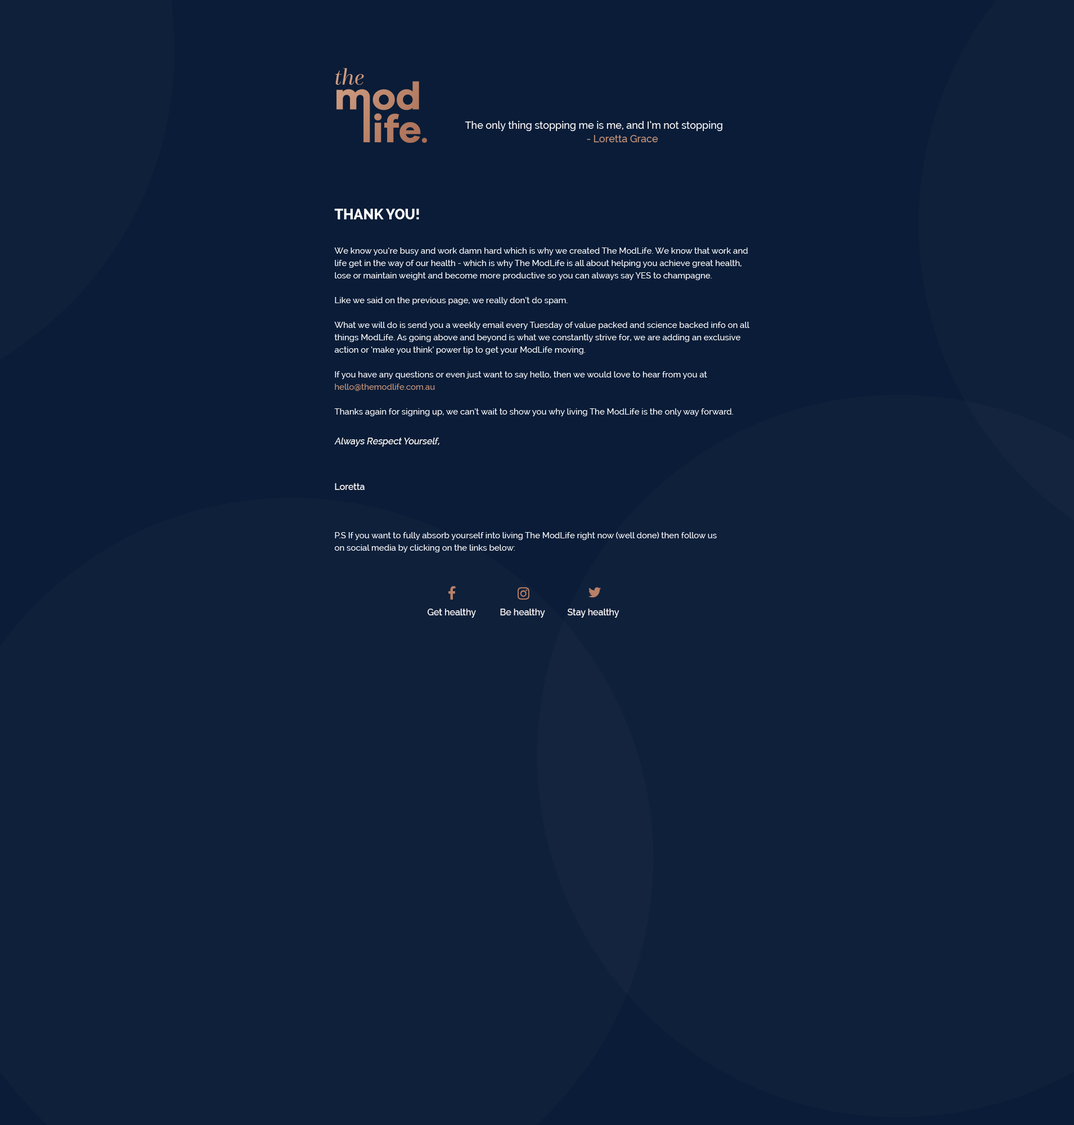
<style>
.page{position:relative;width:1074px;height:1125px;background:#0f203b}
.page>*{position:absolute;margin:0}
.t1{font:10.1px/13.5px "Raleway-Medium";color:#ffffff}
.t2{font:10.1px/13.5px "Raleway-Medium";color:#c9967a}
.t3{font:14.1px "Raleway-ExtraBold";color:#ffffff}
.t4{font:8.4px/12.4px "Raleway-Medium";color:#ffffff}
.t5{font:8.4px/12.4px "Raleway-Medium";color:#c9967a}
.t6{font:9px/14.6px "Raleway-Medium";color:#ffffff;font-style:italic}
.t7{font:9px/16.3px "Raleway-Medium";color:#ffffff}
.t8{font:9px "Raleway-Medium";color:#ffffff}
</style>
<div class="page">
<p class="t1" style="left:465px;top:121px;width:257px;height:21px">The only thing stopping me is me, and I’m not stopping<br>      <span class="t2">- Loretta Grace</span></p>
<p class="t3" style="left:334px;top:209px;width:85px;height:10px">THANK YOU!</p>
<p class="t4" style="left:334px;top:248px;width:415px;height:168px">We know you’re busy and work damn hard which is why we created The ModLife. We know that work and life get in the way of our health - which is why The ModLife is all about helping you achieve great health, lose or maintain weight and become more productive so you can always say YES to champagne.<br><br>Like we said on the previous page, we really don’t do spam. <br><br>What we will do is send you a weekly email every Tuesday of value packed and science backed info on all things ModLife. As going above and beyond is what we constantly strive for, we are adding an exclusive action or ‘make you think’ power tip to get your ModLife moving.<br><br>If you have any questions or even just want to say hello, then we would love to hear from you at <span class="t5">hello@themodlife.com.au<br></span><br>Thanks again for signing up, we can’t wait to show you why living The ModLife is the only way forward.</p>
<p class="t6" style="left:334px;top:438px;width:105px;height:52px">Always Respect Yourself,<br><br><br><span class="t7">Loretta</span></p>
<p class="t4" style="left:335px;top:532px;width:382px;height:20px">P.S If you want to fully absorb yourself into living The ModLife right now (well done) then follow us on social media by clicking on the links below:</p>
<p class="t8" style="left:428px;top:609px;width:48px;height:9px">Get healthy</p>
<p class="t8" style="left:500px;top:609px;width:45px;height:9px">Be healthy</p>
<p class="t8" style="left:568px;top:609px;width:51px;height:9px">Stay healthy</p>
</div>
